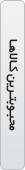
<style>
.page{position:relative;width:25px;height:170px}
.page>*{position:absolute;margin:0}
.t1{font:13.2px "BYekan";color:#231f20}
</style>
<div class="page">
<p class="t1" style="left:6px;top:39px;width:12px;height:92px;rotate:90deg">محبـوبتـرین کـالاهـا</p>
</div>
